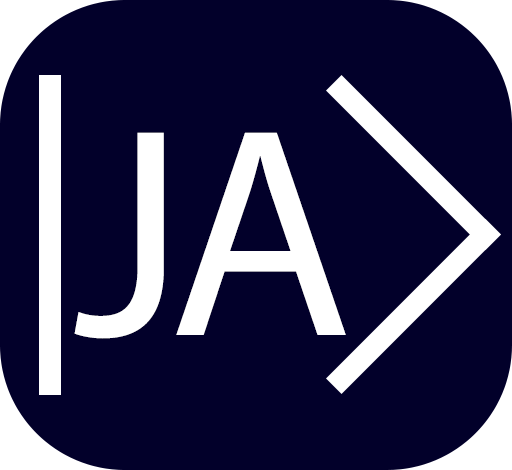
<style>
.page{position:relative;width:512px;height:470px;background:#02002a}
.page>*{position:absolute;margin:0}
.t1{font:300px "MyriadPro-Regular";color:#ffffff}
</style>
<div class="page">
<p class="t1" style="left:74px;top:132px;width:272px;height:207px">JA</p>
</div>
